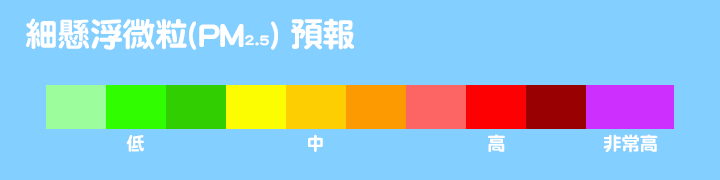
<style>
.page{position:relative;width:720px;height:180px;background:#83cfff}
.page>*{position:absolute;margin:0}
.t1{font:33.3px "DFNYuan-W9-WINP-BF";letter-spacing:-0.025em;color:#ffffff}
.t2{font:14.6px "DFNYuan-W9-WINP-BF";letter-spacing:-0.025em;color:#ffffff}
.t3{font:18.8px "DFNYuan-W9-WIN-BF";letter-spacing:-0.025em;color:#ffffff}
</style>
<div class="page">
<p class="t1" style="left:26px;top:18px;width:329px;height:32px">細懸浮微粒(PM<span class="t2">2.5</span>) 預報</p>
<p class="t3" style="left:126px;top:135px;width:18px;height:17px">低</p>
<p class="t3" style="left:308px;top:134px;width:15px;height:18px">中</p>
<p class="t3" style="left:488px;top:134px;width:17px;height:18px">高</p>
<p class="t3" style="left:603px;top:134px;width:55px;height:19px">非常高</p>
</div>
